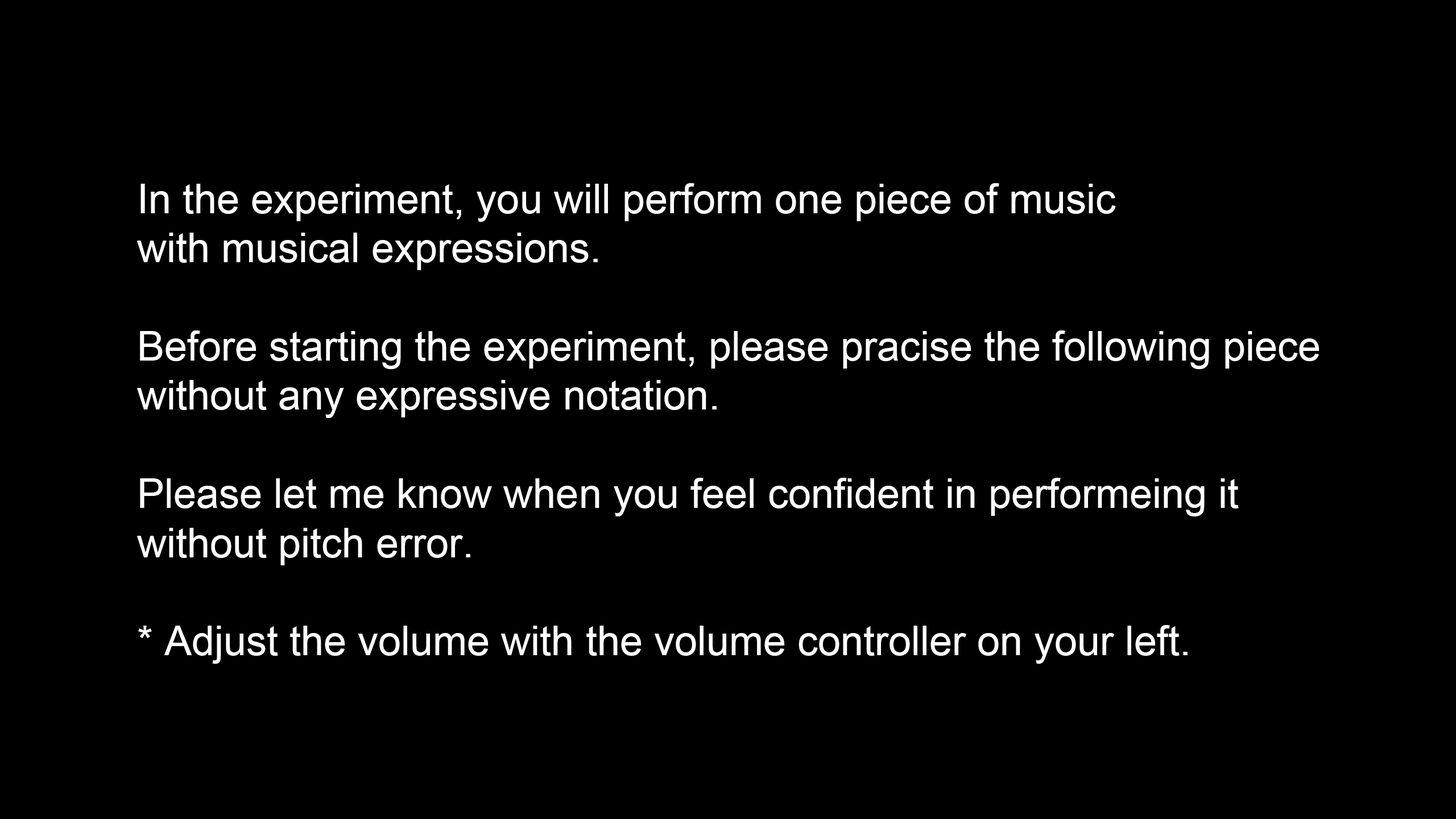
<style>
.page{position:relative;width:1456px;height:819px;background:#000000}
.page>*{position:absolute;margin:0}
.t1{font:40.9px "ArialMT";color:#ffffff}
</style>
<div class="page">
<p class="t1" style="left:137px;top:183px;width:1182px;height:481px">In the experiment, you will perform one piece of music<br>with musical expressions.<br><br>Before starting the experiment, please pracise the following piece<br>without any expressive notation.<br><br>Please let me know when you feel confident in performeing it<br>without pitch error.<br><br>* Adjust the volume with the volume controller on your left.</p>
</div>
